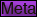
<style>
.page{position:relative;width:37px;height:17px}
.page>*{position:absolute;margin:0}
.t1{font:16px "Helvetica";color:#151006}
</style>
<div class="page">
<p class="t1" style="left:1px;top:2px;width:35px;height:12px">Meta</p>
</div>
